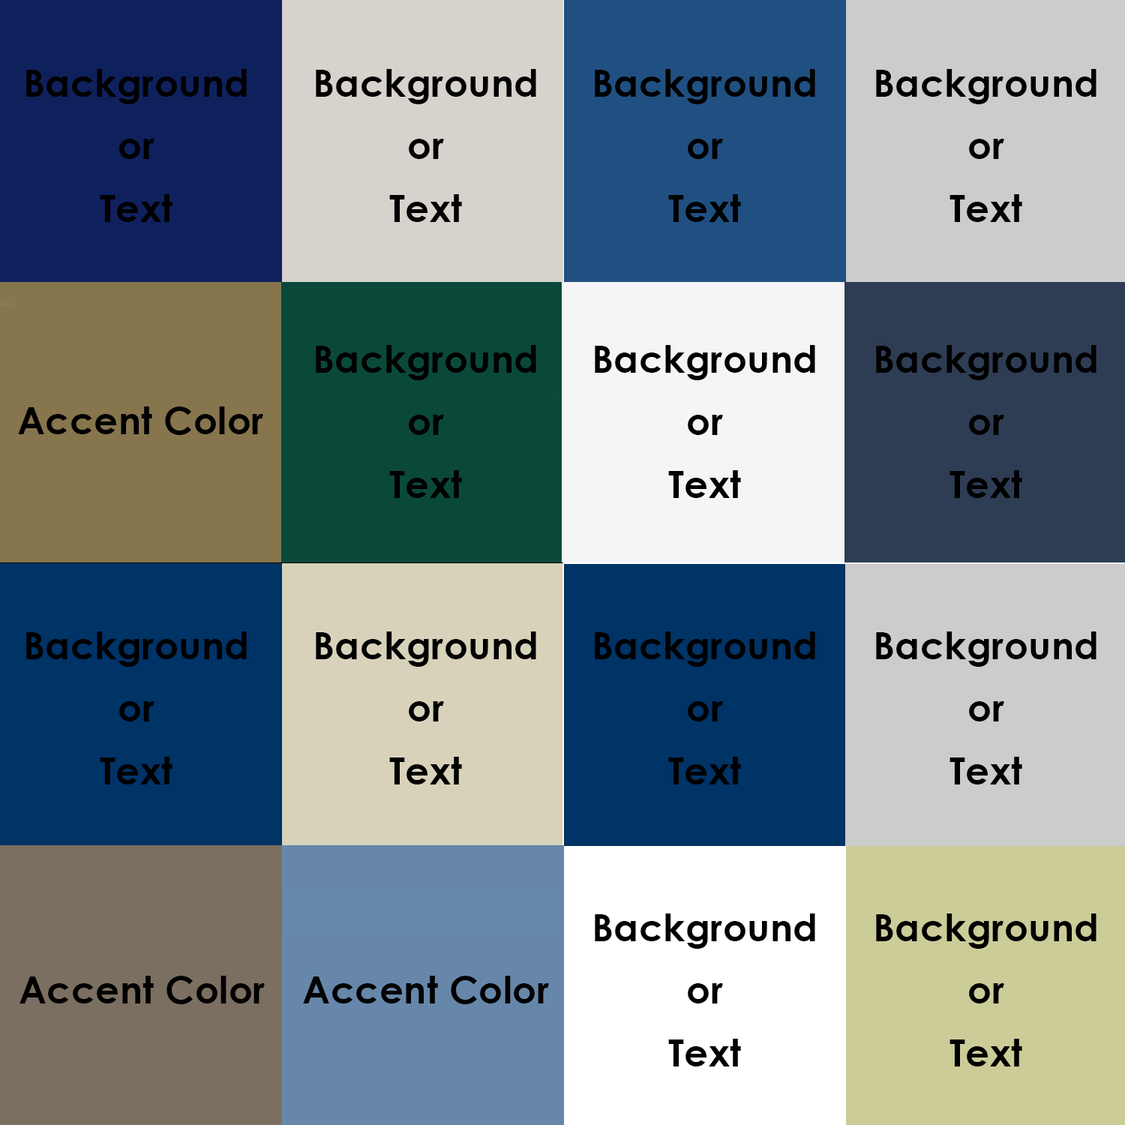
<style>
.page{position:relative;width:1125px;height:1125px}
.page>*{position:absolute;margin:0}
.t1{font:9px/62.5px "CenturyGothic-Bold";letter-spacing:0.01em;color:#000000}
.t2{font:37.5px "CenturyGothic-Bold";letter-spacing:0.01em;color:#000000}
.t3{font:9px/62.5px "CenturyGothic-Bold";letter-spacing:0.01em;color:#020000}
</style>
<div class="page">
<p class="t1" style="left:26px;top:69px;width:221px;height:153px;text-align:center">Background<br>or<br>Text</p>
<p class="t1" style="left:316px;top:69px;width:220px;height:153px;text-align:center">Background<br>or<br>Text</p>
<p class="t1" style="left:595px;top:69px;width:220px;height:153px;text-align:center">Background<br>or<br>Text</p>
<p class="t1" style="left:876px;top:69px;width:220px;height:153px;text-align:center">Background<br>or<br>Text</p>
<p class="t1" style="left:316px;top:345px;width:220px;height:153px;text-align:center">Background<br>or<br>Text</p>
<p class="t1" style="left:595px;top:345px;width:220px;height:153px;text-align:center">Background<br>or<br>Text</p>
<p class="t1" style="left:876px;top:345px;width:220px;height:153px;text-align:center">Background<br>or<br>Text</p>
<p class="t2" style="left:18px;top:406px;width:245px;height:29px">Accent Color</p>
<p class="t1" style="left:26px;top:632px;width:221px;height:152px;text-align:center">Background<br>or<br>Text</p>
<p class="t1" style="left:316px;top:632px;width:220px;height:152px;text-align:center">Background<br>or<br>Text</p>
<p class="t1" style="left:595px;top:632px;width:220px;height:152px;text-align:center">Background<br>or<br>Text</p>
<p class="t1" style="left:876px;top:632px;width:220px;height:152px;text-align:center">Background<br>or<br>Text</p>
<p class="t1" style="left:595px;top:914px;width:220px;height:152px;text-align:center">Background<br>or<br>Text</p>
<p class="t1" style="left:876px;top:914px;width:220px;height:152px;text-align:center">Background<br>or<br>Text</p>
<p class="t1" style="left:20px;top:976px;width:245px;height:28px;text-align:center">Accent Color</p>
<p class="t3" style="left:303px;top:976px;width:246px;height:28px;text-align:center">Accent Color</p>
</div>
